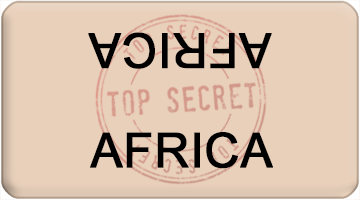
<style>
.page{position:relative;width:360px;height:200px;background:#e8d0bb}
.page>*{position:absolute;margin:0}
.t1{font:48px "ArialMT";color:#000000;font-weight:bold}
</style>
<div class="page">
<p class="t1" style="left:88px;top:32px;width:184px;height:37px;rotate:180deg">AFRICA</p>
<p class="t1" style="left:90px;top:132px;width:183px;height:37px">AFRICA</p>
</div>
